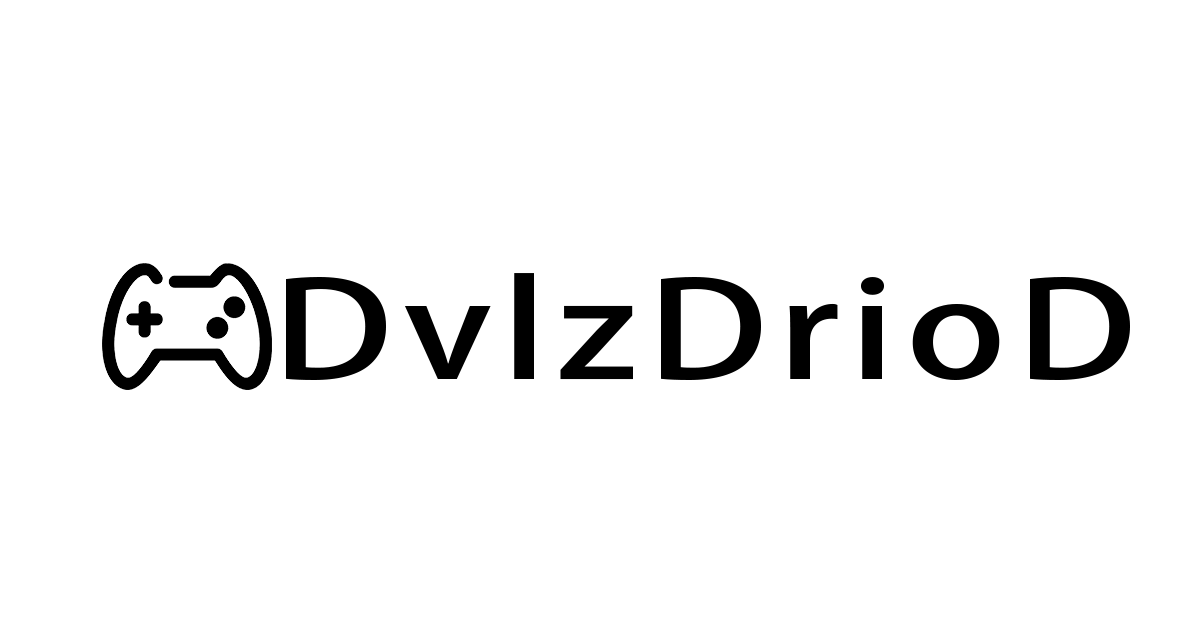
<style>
.page{position:relative;width:1200px;height:630px;background:#ffffff}
.page>*{position:absolute;margin:0}
.t1{font:132px "AdobeHeitiStd-Regular";letter-spacing:0.06em;color:#000000;scale:1.29 1}
</style>
<div class="page">
<p class="t1" style="left:286px;top:273px;width:844px;height:107px">DvlzDrioD</p>
</div>
